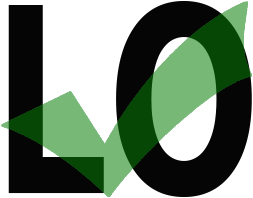
<style>
.page{position:relative;width:253px;height:198px;background:#050505}
.page>*{position:absolute;margin:0}
.t1{font:259.2px "Verdana-Bold";color:#050505;scale:0.7 1}
</style>
<div class="page">
<p class="t1" style="left:8px;top:1px;width:244px;height:196px">LO</p>
</div>
